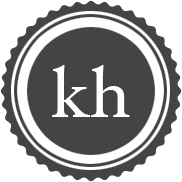
<style>
.page{position:relative;width:182px;height:182px;background:#444444}
.page>*{position:absolute;margin:0}
.t1{font:72px "HoeflerText-Regular";color:#ffffff}
</style>
<div class="page">
<p class="t1" style="left:52px;top:65px;width:78px;height:52px">kh</p>
</div>
